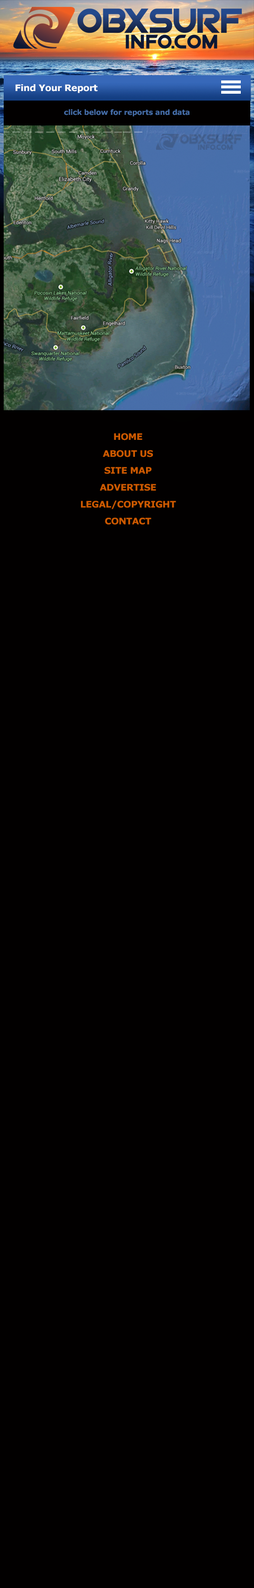
<style>
.page{position:relative;width:254px;height:1588px;background:#020000}
.page>*{position:absolute;margin:0}
.t1{font:9px "Verdana-Bold";letter-spacing:-0.02em;color:#ffffff}
.t2{font:7.3px "Verdana-Bold";letter-spacing:-0.02em;color:#476faa}
.t3{font:9px/16.9px "Verdana-Bold";letter-spacing:-0.02em;color:#cd5a00}
</style>
<div class="page">
<p class="t1" style="left:15px;top:84px;width:83px;height:9px">Find Your Report</p>
<p class="t2" style="left:64px;top:109px;width:126px;height:7px">click below for reports and data</p>
<p class="t3" style="left:81px;top:433px;width:95px;height:92px;text-align:center">HOME<br>ABOUT US<br>SITE MAP<br>ADVERTISE<br>LEGAL/COPYRIGHT<br>CONTACT</p>
</div>
